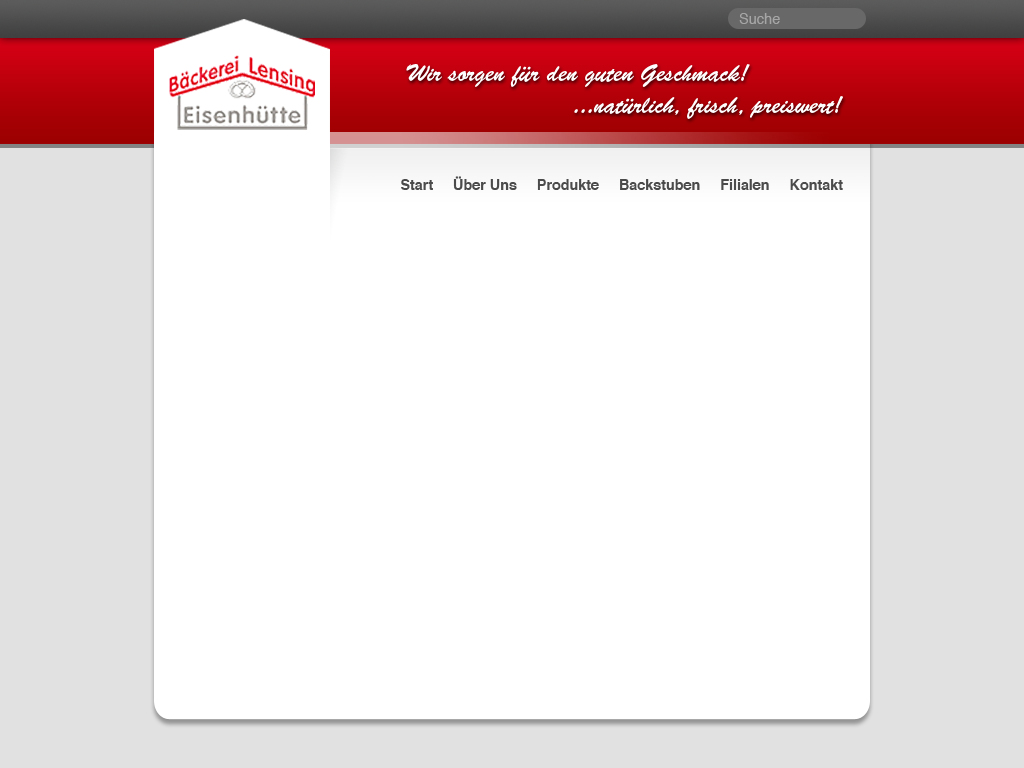
<style>
.page{position:relative;width:1024px;height:768px;background:#ffffff}
.page>*{position:absolute;margin:0}
.t1{font:15px "Helvetica";color:#a6a6a6;scale:0.97 1}
.t2{font:24px/32.1px "BrushScriptStd";color:#fefdfd;scale:0.97 1}
.t3{font:14.8px "Helvetica-Bold";color:#4b4b4b;scale:0.97 1}
</style>
<div class="page">
<p class="t1" style="left:739px;top:13px;width:41px;height:11px">Suche</p>
<p class="t2" style="left:406px;top:64px;width:437px;height:55px;text-align:center">Wir sorgen für den guten Geschmack!<br>                                 ...natürlich, frisch, preiswert!</p>
<p class="t3" style="left:401px;top:176px;width:442px;height:14px">Start     Über Uns     Produkte     Backstuben     Filialen     Kontakt</p>
</div>
